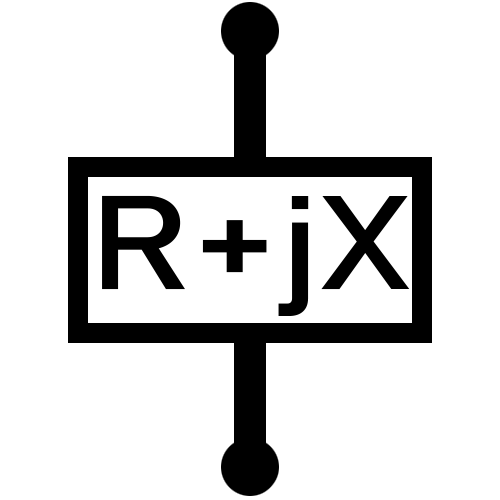
<style>
.page{position:relative;width:500px;height:500px;background:#ffffff}
.page>*{position:absolute;margin:0}
.t1{font:131.5px "Bahnschrift";color:#000000;scale:1.22 1}
</style>
<div class="page">
<p class="t1" style="left:102px;top:195px;width:308px;height:121px">R+jX</p>
</div>
